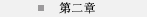
<style>
.page{position:relative;width:147px;height:17px;background:#f1f1f1}
.page>*{position:absolute;margin:0}
.t1{font:12px "SimSun";color:#000000;font-weight:bold}
</style>
<div class="page">
<p class="t1" style="left:39px;top:0px;width:77px;height:17px">第二章</p>
</div>
